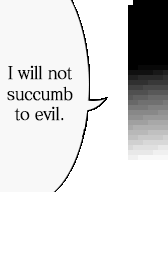
<style>
.page{position:relative;width:168px;height:256px;background:#ffffff}
.page>*{position:absolute;margin:0}
.t1{font:17.6px/20.5px "MatissePro-M";letter-spacing:-0.05em;color:#000000;font-weight:bold;scale:0.91 1}
</style>
<div class="page">
<p class="t1" style="left:7px;top:65px;width:66px;height:56px;text-align:center">I will not<br>succumb<br>to evil.</p>
</div>
